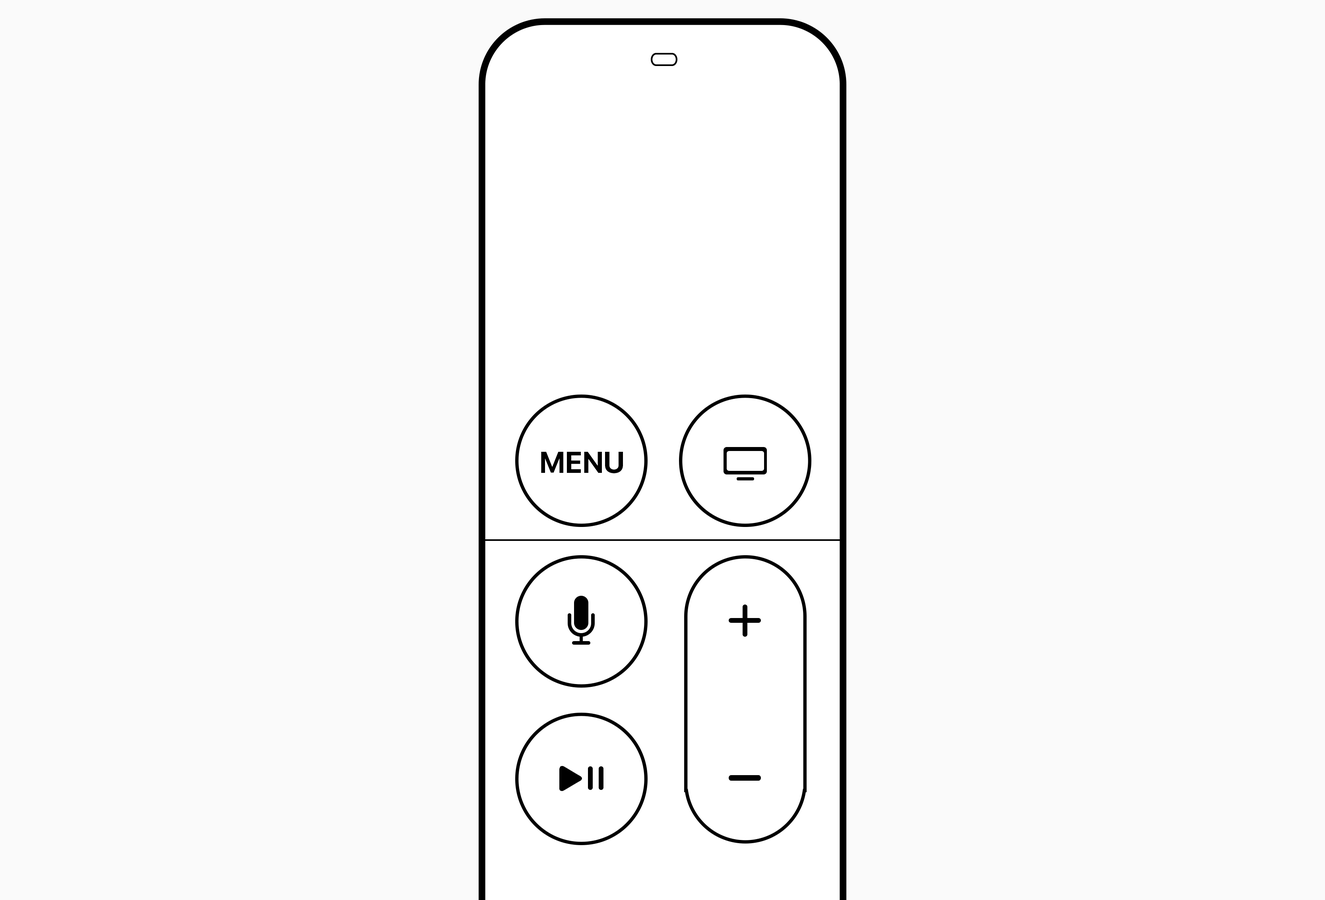
<style>
.page{position:relative;width:1325px;height:900px;background:#fafafa}
.page>*{position:absolute;margin:0}
.t1{font:29.8px "SFUIDisplay-Bold";color:#000000}
</style>
<div class="page">
<p class="t1" style="left:541px;top:452px;width:82px;height:21px">MENU</p>
</div>
